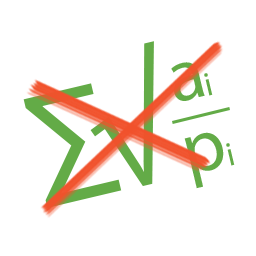
<style>
.page{position:relative;width:256px;height:256px;background:#ffffff}
.page>*{position:absolute;margin:0}
.t1{font:150px "MyriadPro-Regular";color:#63ab47}
.t2{font:75px "MyriadPro-Regular"}
.t3{font:33.3px "MyriadPro-Regular";color:#63ab47}
.t4{font:75px "MyriadPro-Regular";color:#63ab47}
</style>
<div class="page">
<p class="t1" style="left:90px;top:41px;width:64px;height:146px;rotate:-13deg">√</p>
<p class="t2" style="left:171px;top:62px;width:34px;height:39px;rotate:-13deg">a</p>
<p class="t3" style="left:204px;top:73px;width:9px;height:23px;rotate:-13deg">i</p>
<p class="t1" style="left:23px;top:83px;width:99px;height:125px;rotate:-13deg">∑</p>
<p class="t4" style="left:184px;top:132px;width:40px;height:57px;rotate:-13deg">p</p>
<p class="t3" style="left:226px;top:143px;width:9px;height:23px;rotate:-13deg">i</p>
</div>
